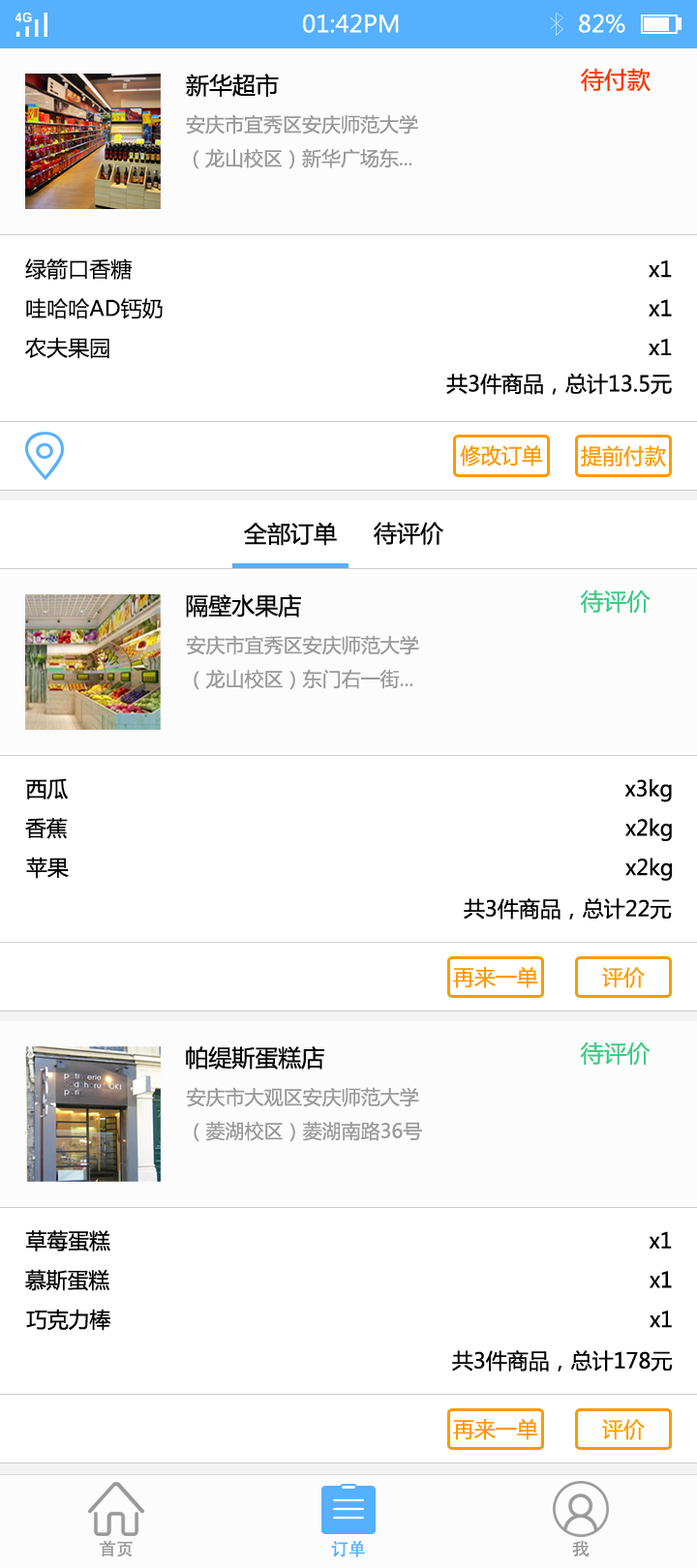
<style>
.page{position:relative;width:697px;height:1568px;background:#ffffff}
.page>*{position:absolute;margin:0}
.t1{font:23.2px "MicrosoftYaHei";color:#fbfdfc}
.t2{font:23.2px "MicrosoftYaHei";color:#030303}
.t3{font:23.2px "MicrosoftYaHei";color:#ff3300}
.t4{font:19.4px "MicrosoftYaHei";color:#999999}
.t5{font:21.3px "MicrosoftYaHei";color:#030303}
.t6{font:21.3px "MicrosoftYaHei";color:#ff9900;scale:0.97 1}
.t7{font:21.3px "MicrosoftYaHei";color:#ff9900}
.t8{font:23.2px "MicrosoftYaHei";color:#3dcc85}
.t9{font:17.4px "AdobeHeitiStd-Regular";color:#999999}
.t10{font:17.4px "AdobeHeitiStd-Regular";color:#55b0fe}
.t11{font:17.4px "AdobeHeitiStd-Regular";color:#999999;scale:1.05 1}
</style>
<div class="page">
<p class="t1" style="left:303px;top:14px;width:96px;height:19px">01:42PM</p>
<p class="t1" style="left:579px;top:14px;width:46px;height:19px">82%</p>
<p class="t2" style="left:186px;top:74px;width:93px;height:23px">新华超市</p>
<p class="t3" style="left:581px;top:68px;width:69px;height:24px">待付款</p>
<p class="t4" style="left:186px;top:114px;width:232px;height:55px">安庆市宜秀区安庆师范大学<br>（龙山校区）新华广场东...</p>
<p class="t5" style="left:25px;top:258px;width:107px;height:22px">绿箭口香糖</p>
<p class="t5" style="left:648px;top:260px;width:24px;height:18px">x1</p>
<p class="t5" style="left:26px;top:298px;width:137px;height:21px">哇哈哈AD钙奶</p>
<p class="t5" style="left:648px;top:299px;width:24px;height:18px">x1</p>
<p class="t5" style="left:25px;top:337px;width:84px;height:22px">农夫果园</p>
<p class="t5" style="left:648px;top:339px;width:24px;height:16px">x1</p>
<p class="t5" style="left:446px;top:373px;width:226px;height:22px">共3件商品，总计13.5元</p>
<p class="t6" style="left:460px;top:445px;width:83px;height:22px">修改订单</p>
<p class="t7" style="left:581px;top:445px;width:85px;height:22px">提前付款</p>
<p class="t2" style="left:244px;top:522px;width:93px;height:24px">全部订单</p>
<p class="t2" style="left:374px;top:522px;width:69px;height:23px">待评价</p>
<p class="t8" style="left:581px;top:589px;width:69px;height:25px">待评价</p>
<p class="t2" style="left:186px;top:594px;width:115px;height:24px">隔壁水果店</p>
<p class="t4" style="left:186px;top:635px;width:233px;height:55px">安庆市宜秀区安庆师范大学<br>（龙山校区）东门右一街...</p>
<p class="t5" style="left:26px;top:778px;width:43px;height:21px">西瓜</p>
<p class="t5" style="left:624px;top:779px;width:48px;height:23px">x3kg</p>
<p class="t5" style="left:25px;top:818px;width:43px;height:21px">香蕉</p>
<p class="t5" style="left:625px;top:818px;width:47px;height:23px">x2kg</p>
<p class="t5" style="left:26px;top:857px;width:43px;height:22px">苹果</p>
<p class="t5" style="left:625px;top:858px;width:47px;height:23px">x2kg</p>
<p class="t5" style="left:464px;top:898px;width:208px;height:22px">共3件商品，总计22元</p>
<p class="t7" style="left:453px;top:967px;width:85px;height:21px">再来一单</p>
<p class="t7" style="left:602px;top:967px;width:43px;height:21px">评价</p>
<p class="t2" style="left:186px;top:1046px;width:138px;height:24px">帕缇斯蛋糕店</p>
<p class="t8" style="left:581px;top:1041px;width:69px;height:25px">待评价</p>
<p class="t4" style="left:186px;top:1087px;width:236px;height:55px">安庆市大观区安庆师范大学<br>（菱湖校区）菱湖南路36号</p>
<p class="t5" style="left:26px;top:1230px;width:84px;height:21px">草莓蛋糕</p>
<p class="t5" style="left:648px;top:1231px;width:24px;height:18px">x1</p>
<p class="t5" style="left:25px;top:1269px;width:84px;height:22px">慕斯蛋糕</p>
<p class="t5" style="left:649px;top:1271px;width:23px;height:17px">x1</p>
<p class="t5" style="left:26px;top:1309px;width:85px;height:22px">巧克力棒</p>
<p class="t5" style="left:649px;top:1311px;width:23px;height:17px">x1</p>
<p class="t5" style="left:452px;top:1350px;width:221px;height:22px">共3件商品，总计178元</p>
<p class="t7" style="left:453px;top:1419px;width:85px;height:21px">再来一单</p>
<p class="t7" style="left:602px;top:1419px;width:43px;height:21px">评价</p>
<p class="t9" style="left:100px;top:1540px;width:33px;height:17px">首页</p>
<p class="t10" style="left:331px;top:1540px;width:34px;height:17px">订单</p>
<p class="t11" style="left:572px;top:1540px;width:17px;height:17px">我</p>
</div>
